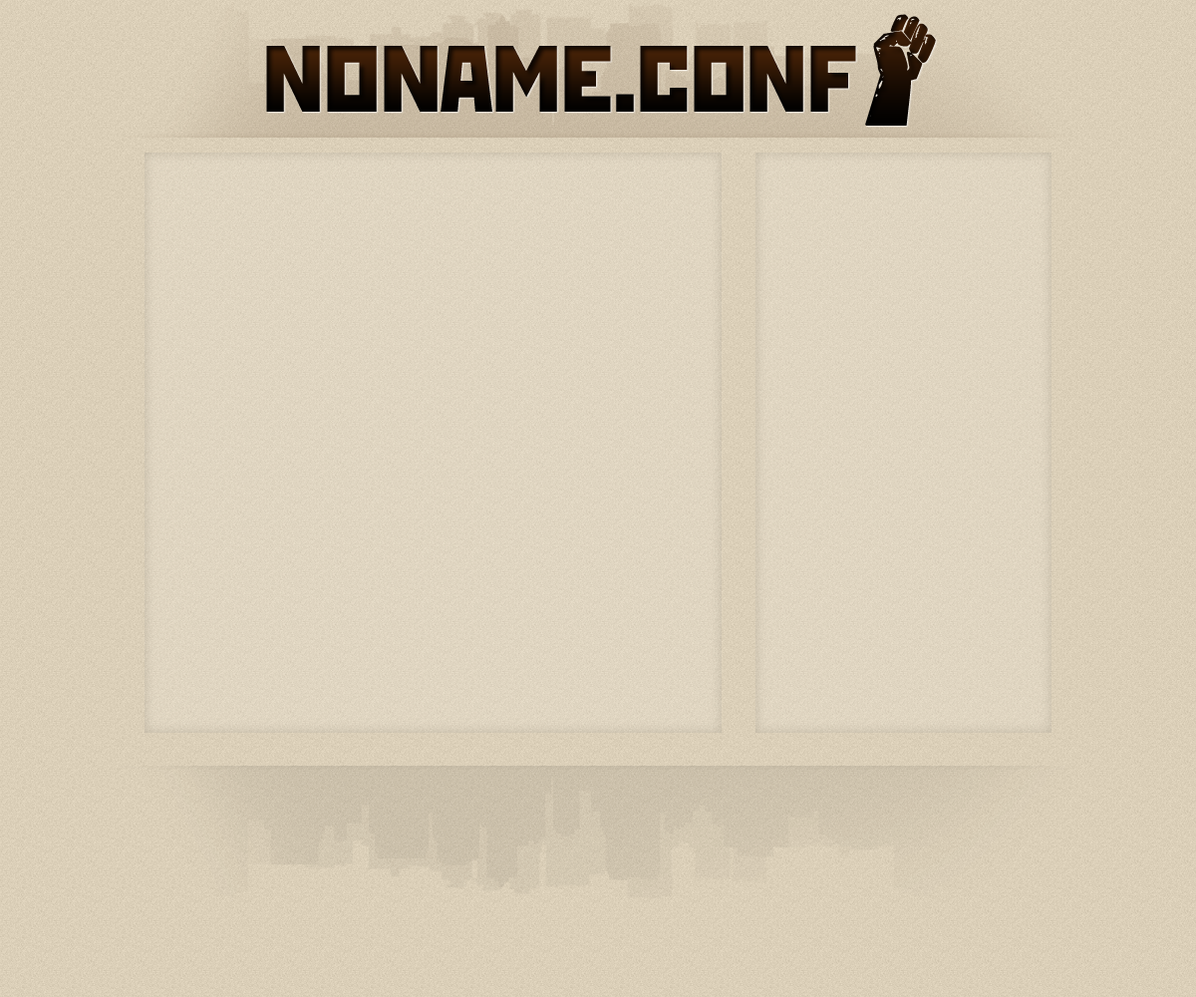
<style>
.page{position:relative;width:1196px;height:997px}
.page>*{position:absolute;margin:0}
.t1{font:139.6px "Devilinside";letter-spacing:-0.01em}
.t2{font:119.6px "StenbergITCTT";letter-spacing:-0.01em}
</style>
<div class="page">
<p class="t1" style="left:865px;top:14px;width:71px;height:112px">v</p>
<p class="t2" style="left:266px;top:46px;width:590px;height:66px">noname.conf</p>
</div>
